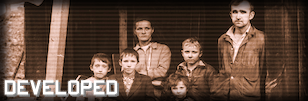
<style>
.page{position:relative;width:308px;height:101px}
.page>*{position:absolute;margin:0}
.t1{font:17.3px "ACES_MIL-STD-2161C";color:#ffffff}
</style>
<div class="page">
<p class="t1" style="left:4px;top:80px;width:113px;height:15px">developed</p>
</div>
